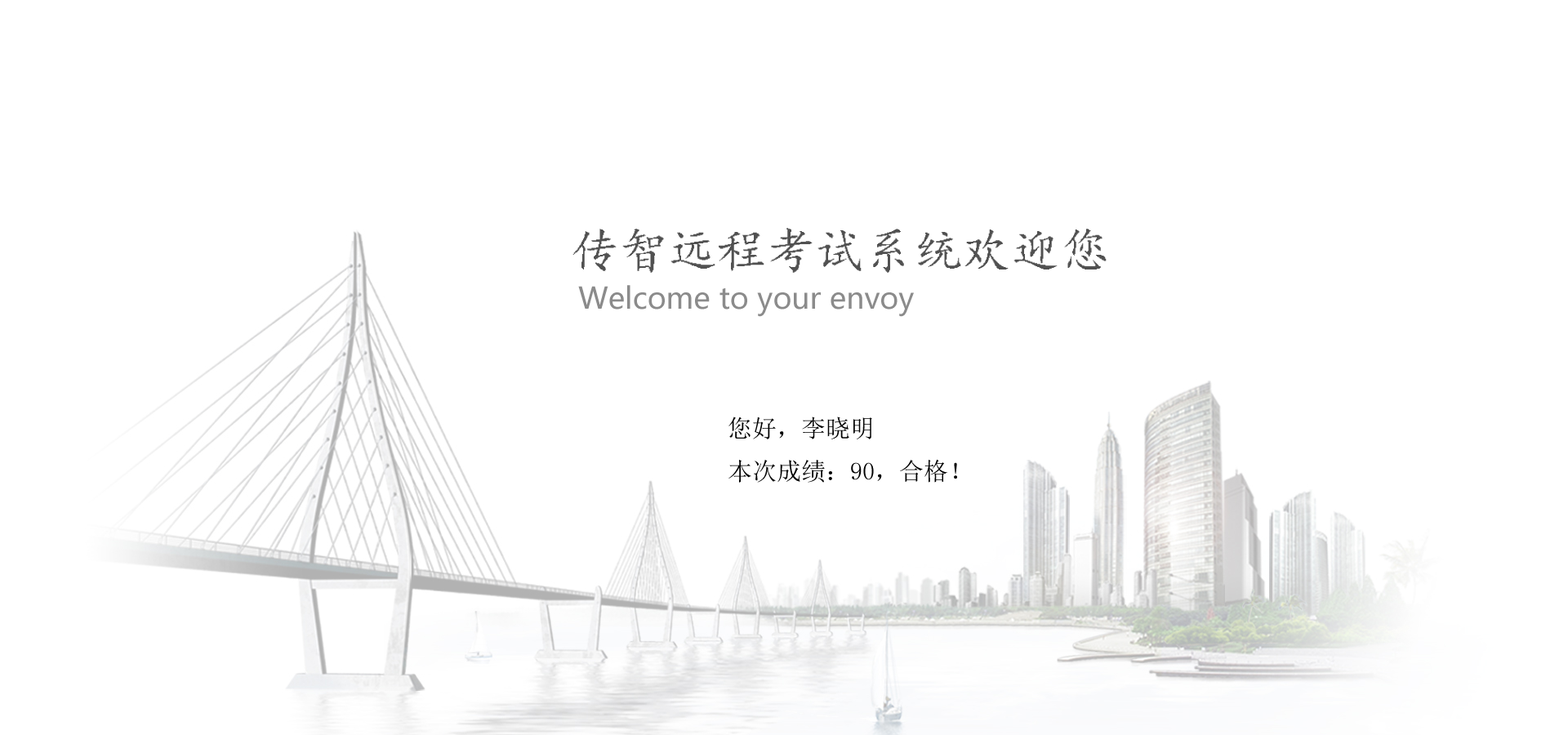
<style>
.page{position:relative;width:1568px;height:735px;background:#ffffff}
.page>*{position:absolute;margin:0}
.t1{font:49px "¿¬Ìå";color:#515151}
.t2{font:29.4px "MicrosoftYaHei";color:#8b8b8b}
.t3{font:24.5px "SimSun";color:#000000}
</style>
<div class="page">
<p class="t1" style="left:572px;top:228px;width:535px;height:45px">传智远程考试系统欢迎您</p>
<p class="t2" style="left:578px;top:285px;width:336px;height:32px">Welcome to your envoy</p>
<p class="t3" style="left:728px;top:416px;width:229px;height:67px">您好，李晓明<br>本次成绩：90，合格！</p>
</div>
